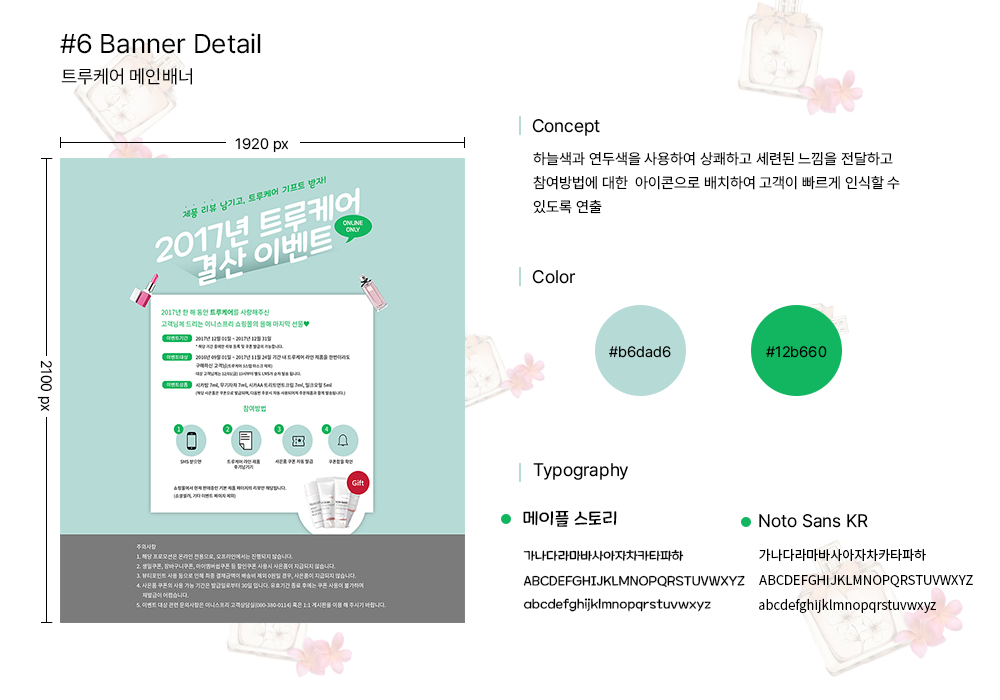
<style>
.page{position:relative;width:1000px;height:700px;background:#ffffff}
.page>*{position:absolute;margin:0}
.t1{font:27px "Pretendard-Regular";color:#000000}
.t2{font:18.7px "Pretendard-Regular";color:#000000}
.t3{font:18px "Pretendard-Regular";color:#000000}
.t4{font:15px "Pretendard-Regular";color:#000000}
.t5{font:15px/24px "Pretendard-Regular";color:#000000}
.t6{font:18px "MaplestoryLight";color:#000000}
.t7{font:13px "MaplestoryLight";color:#000000}
.t8{font:13px "NotoSansKR-Regular";color:#000000}
</style>
<div class="page">
<p class="t1" style="left:60px;top:33px;width:201px;height:21px">#6 Banner Detail</p>
<p class="t2" style="left:61px;top:68px;width:131px;height:17px">트루케어 메인배너</p>
<p class="t3" style="left:532px;top:119px;width:68px;height:17px">Concept</p>
<p class="t4" style="left:235px;top:138px;width:54px;height:15px">1920 px</p>
<p class="t5" style="left:533px;top:152px;width:367px;height:62px">하늘색과 연두색을 사용하여 상쾌하고 세련된 느낌을 전달하고<br>참여방법에 대한  아이콘으로 배치하여 고객이 빠르게 인식할 수<br>있도록 연출</p>
<p class="t3" style="left:532px;top:270px;width:44px;height:14px">Color</p>
<p class="t4" style="left:609px;top:346px;width:62px;height:12px">#b6dad6</p>
<p class="t4" style="left:766px;top:346px;width:61px;height:12px">#12b660</p>
<p class="t4" style="left:37px;top:360px;width:15px;height:51px;rotate:90deg">2100 px</p>
<p class="t3" style="left:533px;top:463px;width:96px;height:17px">Typography</p>
<p class="t6" style="left:523px;top:510px;width:94px;height:17px">메이플 스토리</p>
<p class="t3" style="left:759px;top:514px;width:109px;height:14px">Noto Sans KR</p>
<p class="t7" style="left:523px;top:549px;width:161px;height:12px">가나다라마바사아자차카타파하</p>
<p class="t8" style="left:759px;top:548px;width:167px;height:14px">가나다라마바사아자차카타파하</p>
<p class="t7" style="left:523px;top:575px;width:222px;height:13px">ABCDEFGHIJKLMNOPQRSTUVWXYZ</p>
<p class="t8" style="left:759px;top:575px;width:214px;height:13px">ABCDEFGHIJKLMNOPQRSTUVWXYZ</p>
<p class="t7" style="left:523px;top:598px;width:188px;height:14px">abcdefghijklmnopqrstuvwxyz</p>
<p class="t8" style="left:759px;top:598px;width:177px;height:15px">abcdefghijklmnopqrstuvwxyz</p>
</div>
